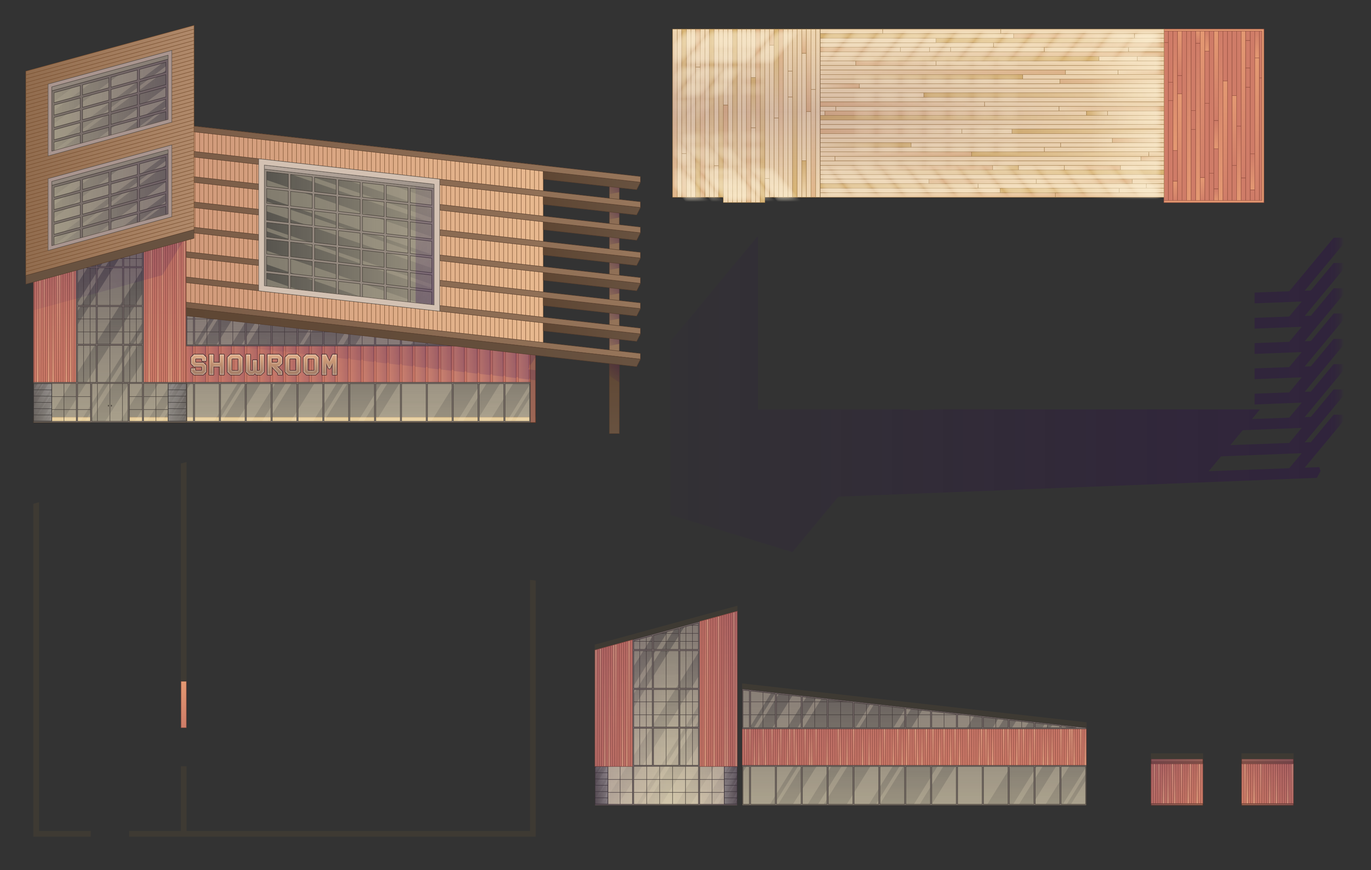
<style>
.page{position:relative;width:1371px;height:870px;background:#333333}
.page>*{position:absolute;margin:0}
.t1{font:28.9px "Video-Bold"}
</style>
<div class="page">
<p class="t1" style="left:191px;top:354px;width:146px;height:21px">SHOWROOM</p>
</div>
